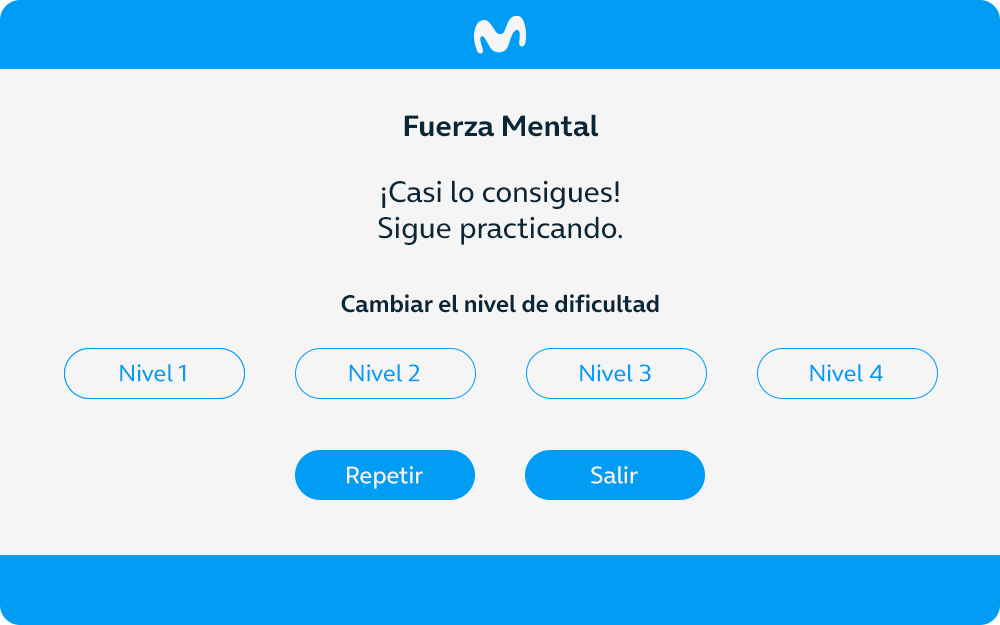
<style>
.page{position:relative;width:1000px;height:625px;background:#f5f5f5}
.page>*{position:absolute;margin:0}
.t1{font:30px "OnAir-Bold";color:#0a2739}
.t2{font:30px "OnAir-Regular";color:#0a2739}
.t3{font:24px "OnAir-Bold";color:#0a2739}
.t4{font:24px "OnAir-Regular";color:#019df4}
.t5{font:24px "OnAir-Regular";color:#f5f5f5}
</style>
<div class="page">
<p class="t1" style="left:404px;top:114px;width:194px;height:23px">Fuerza Mental</p>
<p class="t2" style="left:378px;top:180px;width:244px;height:65px;text-align:center">¡Casi lo consigues!<br>Sigue practicando.</p>
<p class="t3" style="left:341px;top:294px;width:318px;height:19px">Cambiar el nivel de dificultad</p>
<p class="t4" style="left:120px;top:364px;width:66px;height:18px">Nivel 1</p>
<p class="t4" style="left:120px;top:364px;width:66px;height:18px">Nivel 1</p>
<p class="t4" style="left:349px;top:364px;width:71px;height:18px">Nivel 2</p>
<p class="t4" style="left:580px;top:364px;width:71px;height:18px">Nivel 3</p>
<p class="t4" style="left:810px;top:364px;width:73px;height:18px">Nivel 4</p>
<p class="t5" style="left:347px;top:466px;width:76px;height:23px">Repetir</p>
<p class="t5" style="left:591px;top:466px;width:47px;height:18px">Salir</p>
</div>
